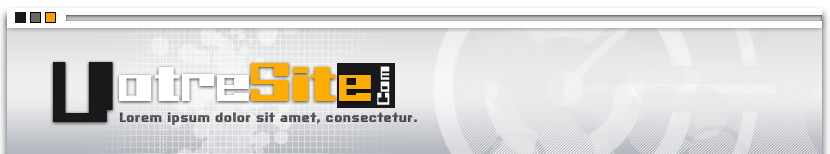
<style>
.page{position:relative;width:830px;height:154px}
.page>*{position:absolute;margin:0}
.t1{font:50px "BelieverEng";color:#ffffff}
.t2{font:80px "BelieverEng";color:#191919}
.t3{font:50px "BelieverEng";color:#ffae01}
.t4{font:16px "BelieverEng";color:#ffffff}
.t5{font:14px "BigDots"}
</style>
<div class="page">
<p class="t1" style="left:53px;top:62px;width:318px;height:60px"><span class="t2">V</span>otre<span class="t3">Site</span></p>
<p class="t4" style="left:377px;top:66px;width:13px;height:39px;rotate:-90deg">Com</p>
<p class="t5" style="left:119px;top:112px;width:298px;height:13px">Lorem ipsum dolor sit amet, consectetur.</p>
</div>
